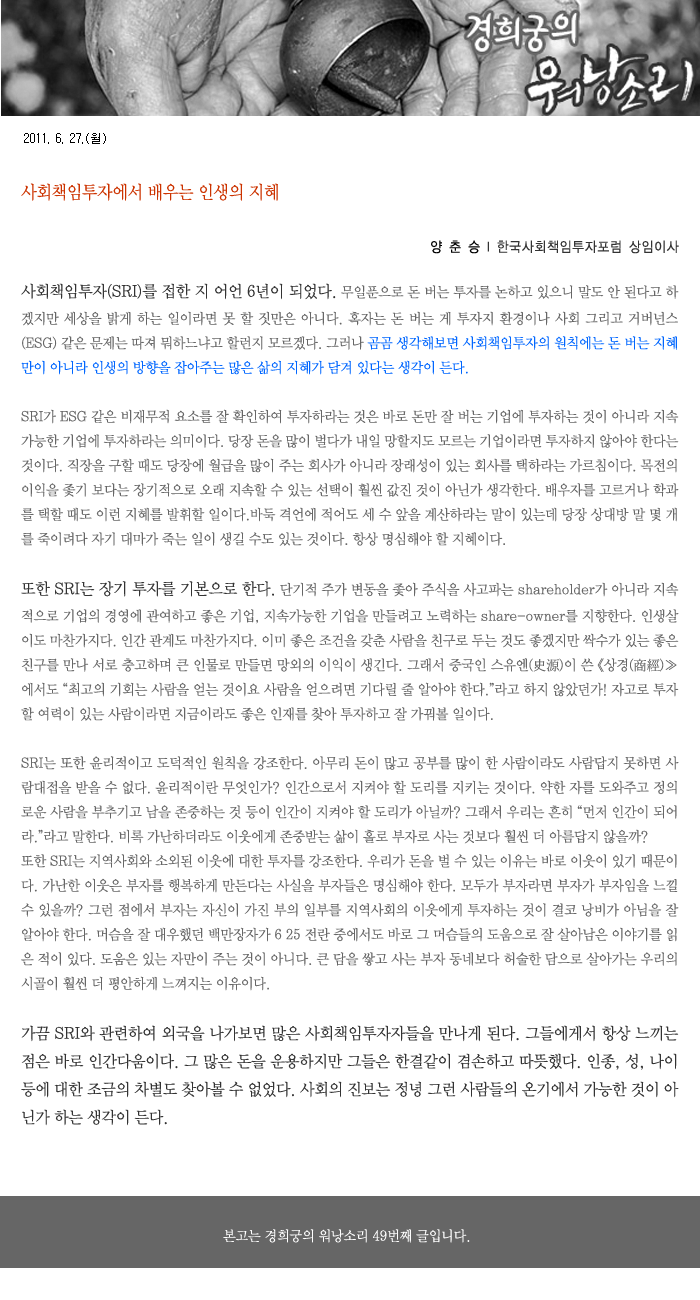
<style>
.page{position:relative;width:700px;height:1300px;background:#ffffff}
.page>*{position:absolute;margin:0}
.t1{font:12px "Gulim";color:#000000}
.t2{font:18px "YDIWebBatan";color:#cc3300;scale:0.9 1}
.t3{font:14px "YDIYGO120-KSCpc-EUC-H";color:#333333;scale:0.9 1}
.t4{font:14px "YDIYGO120-KSCpc-EUC-H";color:#000000;scale:0.9 1}
.t5{font:14px "YDIWebBatan";color:#666666;scale:0.95 1}
.t6{font:16px "YDIWebBatan";color:#333333;scale:0.95 1}
.t7{font:14px "YDIWebBatan";color:#0066ff;scale:0.95 1}
.t8{font:14px "YDIWebBatan";color:#ffffff;scale:0.95 1}
</style>
<div class="page">
<p class="t1" style="left:24px;top:133px;width:82px;height:11px">2011. 6. 27.(월)</p>
<p class="t2" style="left:21px;top:183px;width:257px;height:18px">사회책임투자에서 배우는 인생의 지혜</p>
<p class="t3" style="left:431px;top:240px;width:248px;height:14px"><span class="t4">양 춘 승 </span>l 한국사회책임투자포럼 상임이사</p>
<p class="t5" style="left:21px;top:283px;width:658px;height:843px;text-align:justify"><span class="t6">사회책임투자(SRI)를 접한 지 어언 6년이 되었다.</span> 무일푼으로 돈 버는 투자를 논하고 있으니 말도 안 된다고 하겠지만 세상을 밝게 하는 일이라면 못 할 짓만은 아니다. 혹자는 돈 버는 게 투자지 환경이나 사회 그리고 거버넌스 (ESG) 같은 문제는 따져 뭐하느냐고 할런지 모르겠다. 그러나 <span class="t7">곰곰 생각해보면 사회책임투자의 원칙에는 돈 버는 지혜만이 아니라 인생의 방향을 잡아주는 많은 삶의 지혜가 담겨 있다는 생각이 든다.<br></span><br>SRI가 ESG 같은 비재무적 요소를 잘 확인하여 투자하라는 것은 바로 돈만 잘 버는 기업에 투자하는 것이 아니라 지속가능한 기업에 투자하라는 의미이다. 당장 돈을 많이 벌다가 내일 망할지도 모르는 기업이라면 투자하지 않아야 한다는 것이다. 직장을 구할 때도 당장에 월급을 많이 주는 회사가 아니라 장래성이 있는 회사를 택하라는 가르침이다. 목전의 이익을 좇기 보다는 장기적으로 오래 지속할 수 있는 선택이 훨씬 값진 것이 아닌가 생각한다. 배우자를 고르거나 학과를 택할 때도 이런 지혜를 발휘할 일이다.바둑 격언에 적어도 세 수 앞을 계산하라는 말이 있는데 당장 상대방 말 몇 개를 죽이려다 자기 대마가 죽는 일이 생길 수도 있는 것이다. 항상 명심해야 할 지혜이다.<br><br><span class="t6">또한 SRI는 장기 투자를 기본으로 한다.</span> 단기적 주가 변동을 좇아 주식을 사고파는 shareholder가 아니라 지속적으로 기업의 경영에 관여하고 좋은 기업, 지속가능한 기업을 만들려고 노력하는 share-owner를 지향한다. 인생살이도 마찬가지다. 인간 관계도 마찬가지다. 이미 좋은 조건을 갖춘 사람을 친구로 두는 것도 좋겠지만 싹수가 있는 좋은 친구를 만나 서로 충고하며 큰 인물로 만들면 망외의 이익이 생긴다. 그래서 중국인 스유엔(史源)이 쓴 《상경(商經)≫에서도 “최고의 기회는 사람을 얻는 것이요 사람을 얻으려면 기다릴 줄 알아야 한다.”라고 하지 않았던가! 자고로 투자할 여력이 있는 사람이라면 지금이라도 좋은 인재를 찾아 투자하고 잘 가꿔볼 일이다.<br><br>SRI는 또한 윤리적이고 도덕적인 원칙을 강조한다. 아무리 돈이 많고 공부를 많이 한 사람이라도 사람답지 못하면 사람대접을 받을 수 없다. 윤리적이란 무엇인가? 인간으로서 지켜야 할 도리를 지키는 것이다. 약한 자를 도와주고 정의로운 사람을 부추기고 남을 존중하는 것 등이 인간이 지켜야 할 도리가 아닐까? 그래서 우리는 흔히 “먼저 인간이 되어라.”라고 말한다. 비록 가난하더라도 이웃에게 존중받는 삶이 홀로 부자로 사는 것보다 훨씬 더 아름답지 않을까? <br>또한 SRI는 지역사회와 소외된 이웃에 대한 투자를 강조한다. 우리가 돈을 벌 수 있는 이유는 바로 이웃이 있기 때문이다. 가난한 이웃은 부자를 행복하게 만든다는 사실을 부자들은 명심해야 한다. 모두가 부자라면 부자가 부자임을 느낄 수 있을까? 그런 점에서 부자는 자신이 가진 부의 일부를 지역사회의 이웃에게 투자하는 것이 결코 낭비가 아님을 잘 알아야 한다. 머슴을 잘 대우했던 백만장자가 6•25 전란 중에서도 바로 그 머슴들의 도움으로 잘 살아남은 이야기를 읽은 적이 있다. 도움은 있는 자만이 주는 것이 아니다. 큰 담을 쌓고 사는 부자 동네보다 허술한 담으로 살아가는 우리의 시골이 훨씬 더 평안하게 느껴지는 이유이다.  <br><br><span class="t6">가끔 SRI와 관련하여 외국을 나가보면 많은 사회책임투자자들을 만나게 된다. 그들에게서 항상 느끼는 점은 바로 인간다움이다. 그 많은 돈을 운용하지만 그들은 한결같이 겸손하고 따뜻했다. 인종, 성, 나이 등에 대한 조금의 차별도 찾아볼 수 없었다. 사회의 진보는 정녕 그런 사람들의 온기에서 가능한 것이 아닌가 하는 생각이 든다.</span></p>
<p class="t8" style="left:223px;top:1229px;width:247px;height:14px">본고는 경희궁의 워낭소리 49번째 글입니다.</p>
</div>
